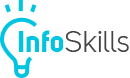
<style>
.page{position:relative;width:130px;height:78px;background:#ffffff}
.page>*{position:absolute;margin:0}
.t1{font:30px "UniSansBook";color:#444444}
.t2{font:30px "UniSansBold";color:#00c4e0}
</style>
<div class="page">
<p class="t1" style="left:18px;top:30px;width:111px;height:22px"><span class="t2">Info</span>Skills</p>
</div>
